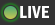
<style>
.page{position:relative;width:55px;height:25px;background:#333333}
.page>*{position:absolute;margin:0}
.t1{font:18px "FranklinGothic-DemiCond";letter-spacing:0.02em;color:#ffffff}
</style>
<div class="page">
<p class="t1" style="left:20px;top:6px;width:29px;height:12px">LIVE</p>
</div>
